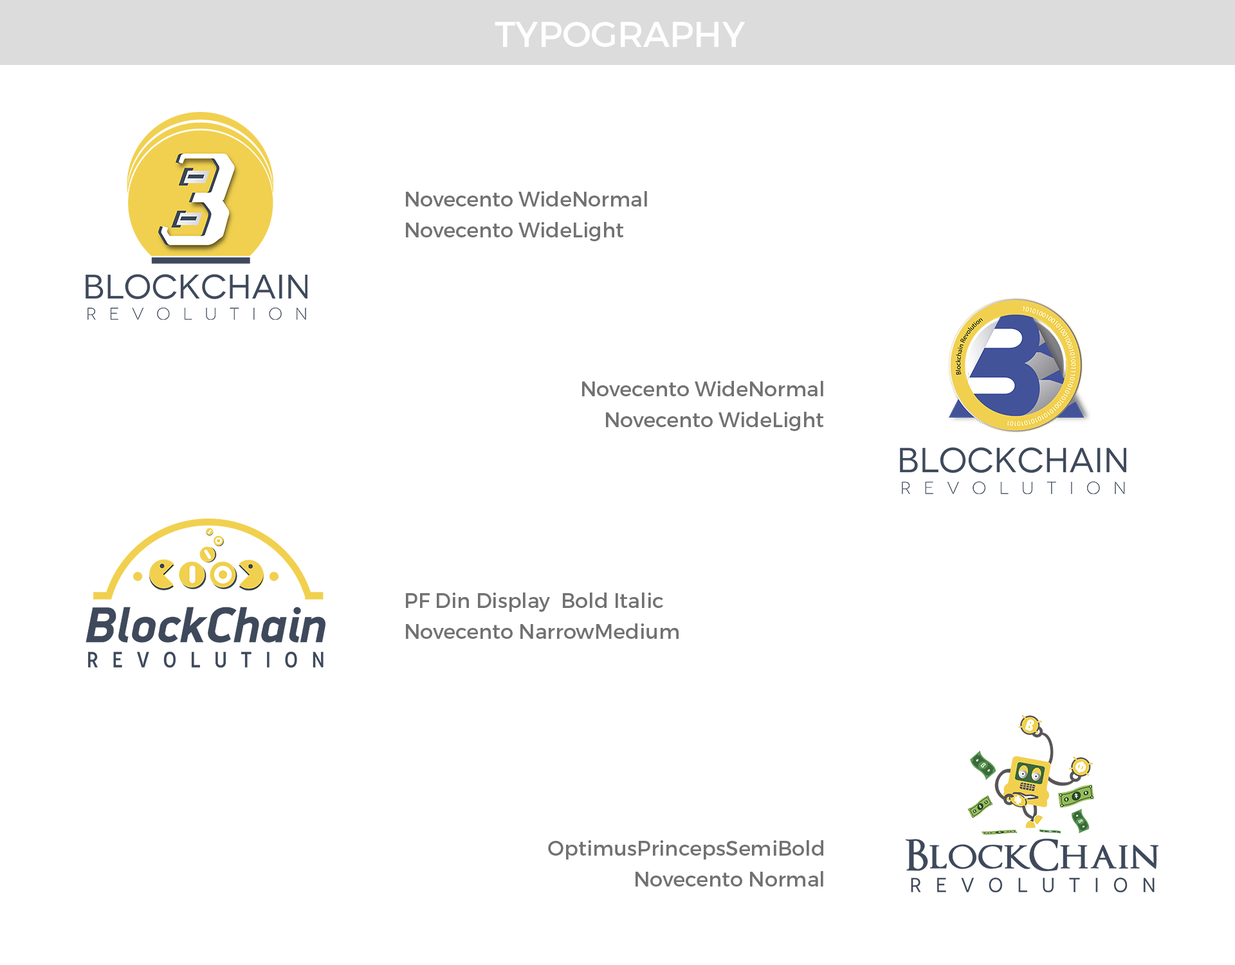
<style>
.page{position:relative;width:1235px;height:965px;background:#ffffff}
.page>*{position:absolute;margin:0}
.t1{font:35.7px "Montserrat-Regular";color:#ffffff}
.t2{font:20.6px "Montserrat-Regular";color:#717171}
</style>
<div class="page">
<p class="t1" style="left:495px;top:22px;width:251px;height:25px">TYPOGRAPHY</p>
<p class="t2" style="left:406px;top:191px;width:241px;height:16px">Novecento WideNormal</p>
<p class="t2" style="left:406px;top:222px;width:218px;height:19px">Novecento WideLight</p>
<p class="t2" style="left:582px;top:381px;width:242px;height:15px">Novecento WideNormal</p>
<p class="t2" style="left:606px;top:412px;width:218px;height:19px">Novecento WideLight</p>
<p class="t2" style="left:406px;top:593px;width:257px;height:19px">PF Din Display  Bold Italic</p>
<p class="t2" style="left:406px;top:624px;width:273px;height:15px">Novecento NarrowMedium</p>
<p class="t2" style="left:548px;top:840px;width:276px;height:20px">OptimusPrincepsSemiBold</p>
<p class="t2" style="left:636px;top:871px;width:188px;height:16px">Novecento Normal</p>
</div>
